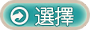
<style>
.page{position:relative;width:90px;height:30px}
.page>*{position:absolute;margin:0}
.t1{font:20px "GothicMB101Pr6N-Light";color:#fffff9}
</style>
<div class="page">
<p class="t1" style="left:35px;top:7px;width:39px;height:19px">選擇</p>
</div>
